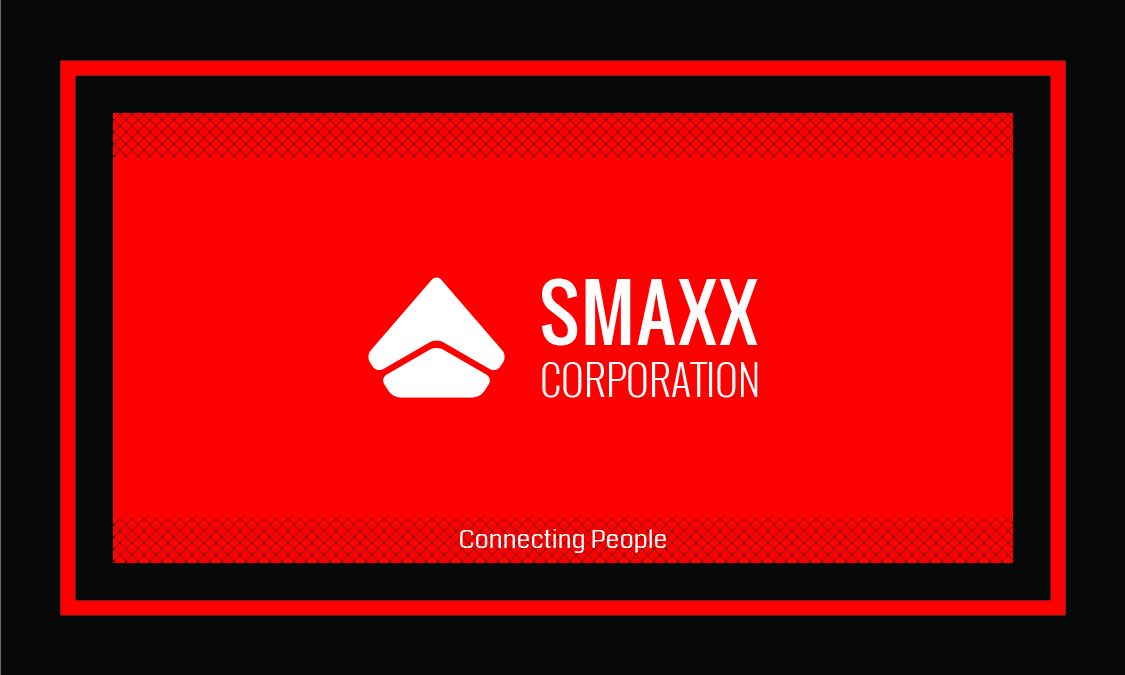
<style>
.page{position:relative;width:1125px;height:675px;background:#ff0000}
.page>*{position:absolute;margin:0}
.t1{font:75px "Oswald-Regular";letter-spacing:0.025em;color:#ffffff;text-transform:uppercase}
.t2{font:41.7px "Oswald-Light";color:#ffffff;text-transform:uppercase}
.t3{font:25px "Coda-Regular";color:#ffffff}
</style>
<div class="page">
<p class="t1" style="left:542px;top:278px;width:216px;height:68px">smaxx</p>
<p class="t2" style="left:542px;top:362px;width:216px;height:36px">corporation</p>
<p class="t3" style="left:460px;top:529px;width:206px;height:24px">Connecting People</p>
</div>
